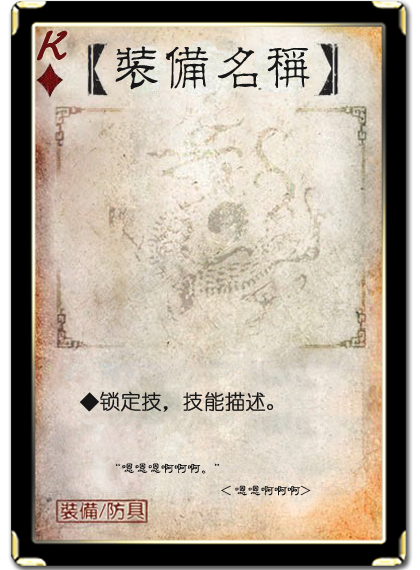
<style>
.page{position:relative;width:420px;height:570px}
.page>*{position:absolute;margin:0}
.t1{font:50.7px "Jxixinkai";color:#661213;font-weight:bold;font-style:italic}
.t2{font:50.7px "¾­µä·±½ÇÁ¥ Regular";color:#161616}
.t3{font:20.3px "YouYuan";color:#161616;font-weight:bold}
.t4{font:13.2px "FZLBJW--GB1-0";color:#161616}
</style>
<div class="page">
<p class="t1" style="left:37px;top:31px;width:30px;height:29px">K</p>
<p class="t2" style="left:115px;top:46px;width:195px;height:44px">装备名称</p>
<p class="t3" style="left:80px;top:391px;width:194px;height:21px">◆锁定技，技能描述。</p>
<p class="t4" style="left:115px;top:463px;width:105px;height:11px">“嗯嗯嗯啊啊啊。”</p>
<p class="t4" style="left:221px;top:485px;width:90px;height:11px">&lt; 嗯嗯啊啊啊&gt;</p>
</div>
